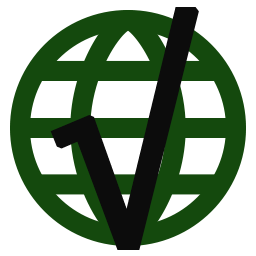
<style>
.page{position:relative;width:256px;height:256px;background:#ffffff}
.page>*{position:absolute;margin:0}
.t1{font:256px "MyriadPro-Regular";color:#0c0c0c;font-weight:bold}
</style>
<div class="page">
<p class="t1" style="left:50px;top:7px;width:149px;height:243px">√</p>
</div>
